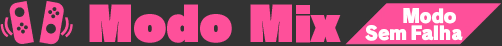
<style>
.page{position:relative;width:502px;height:46px;background:#333333}
.page>*{position:absolute;margin:0}
.t1{font:48px "RaglanStd-UB";letter-spacing:-0.012em;color:#fe509a}
.t2{font:18.7px "RodinNTLGPro-UB";letter-spacing:-0.03em;color:#ffffff}
</style>
<div class="page">
<p class="t1" style="left:89px;top:4px;width:252px;height:39px">Modo Mix</p>
<p class="t2" style="left:403px;top:8px;width:53px;height:16px">Modo</p>
<p class="t2" style="left:365px;top:25px;width:42px;height:16px">Sem</p>
<p class="t2" style="left:411px;top:25px;width:52px;height:16px">Falha</p>
</div>
